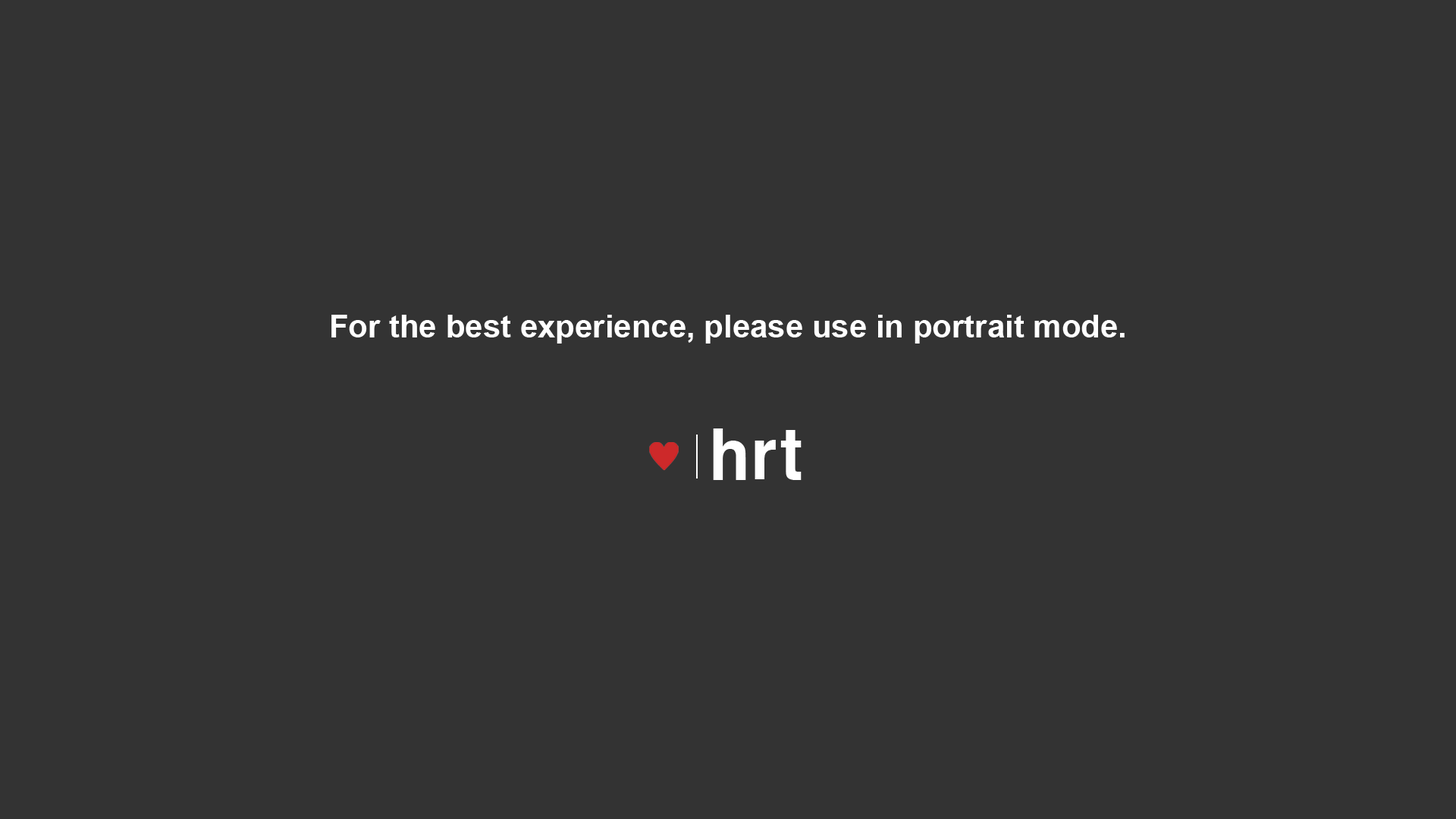
<style>
.page{position:relative;width:1456px;height:819px;background:#333333}
.page>*{position:absolute;margin:0}
.t1{font:31.8px "Arial-BoldMT";color:#ffffff}
.t2{font:70.9px "Helvetica-Bold";color:#ffffff;scale:0.94 1}
</style>
<div class="page">
<p class="t1" style="left:331px;top:315px;width:794px;height:29px">For the best experience, please use in portrait mode.</p>
<p class="t2" style="left:713px;top:428px;width:33px;height:52px">h</p>
<p class="t2" style="left:780px;top:430px;width:22px;height:50px">t</p>
<p class="t2" style="left:755px;top:440px;width:21px;height:39px">r</p>
</div>
